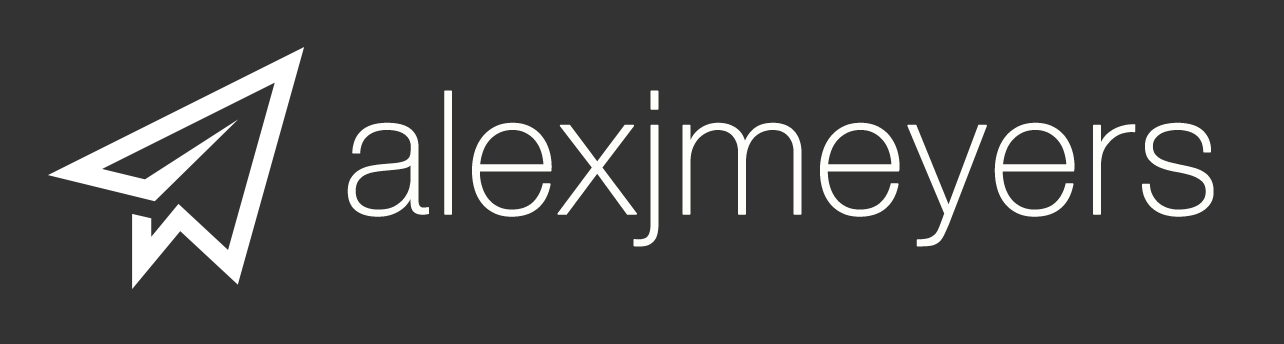
<style>
.page{position:relative;width:1284px;height:344px;background:#333333}
.page>*{position:absolute;margin:0}
.t1{font:172px "HelveticaNeue-Thin";color:#fefefa;font-weight:bold}
</style>
<div class="page">
<p class="t1" style="left:347px;top:90px;width:867px;height:157px">alexjmeyers</p>
</div>
